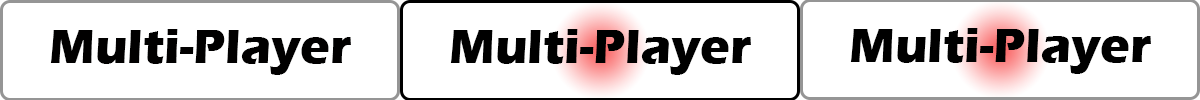
<style>
.page{position:relative;width:1200px;height:100px;background:#ffffff}
.page>*{position:absolute;margin:0}
.t1{font:50px "ErasITC-Bold";color:#010000}
.t2{font:50px "ErasITC-Bold";color:#000000}
</style>
<div class="page">
<p class="t1" style="left:50px;top:29px;width:301px;height:46px">Multi-Player</p>
<p class="t2" style="left:450px;top:29px;width:301px;height:46px">Multi-Player</p>
<p class="t2" style="left:850px;top:28px;width:301px;height:46px">Multi-Player</p>
</div>
